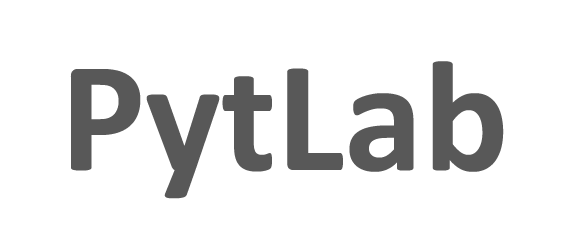
<style>
.page{position:relative;width:565px;height:250px;background:#ffffff}
.page>*{position:absolute;margin:0}
.t1{font:160px "Calibri-Bold";color:#585858}
</style>
<div class="page">
<p class="t1" style="left:70px;top:61px;width:434px;height:138px">PytLab</p>
</div>
